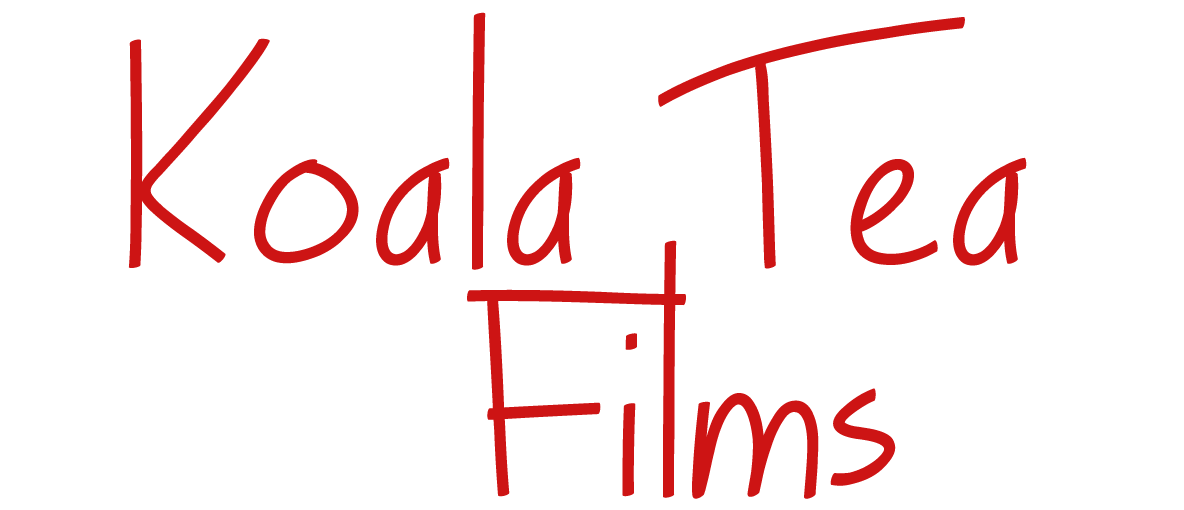
<style>
.page{position:relative;width:1184px;height:510px;background:#ffffff}
.page>*{position:absolute;margin:0}
.t1{font:190px "Turkeyface";color:#cd1414}
</style>
<div class="page">
<p class="t1" style="left:128px;top:12px;width:899px;height:487px">Koala Tea<br>                               Films</p>
</div>
